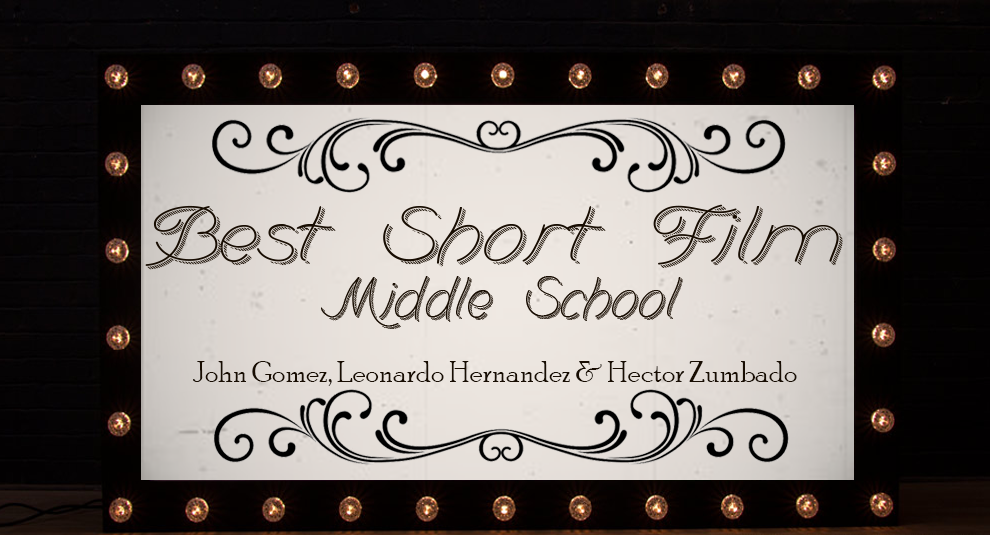
<style>
.page{position:relative;width:990px;height:535px}
.page>*{position:absolute;margin:0}
.t1{font:88px "BranumCursive";color:#180d02;scale:1.18 1}
.t2{font:65px "BranumCursive";color:#180d02}
.t3{font:30px "PoorRichard-Regular";color:#180d02}
</style>
<div class="page">
<p class="t1" style="left:145px;top:204px;width:698px;height:66px">Best Short Film</p>
<p class="t2" style="left:321px;top:276px;width:362px;height:53px">Middle School</p>
<p class="t3" style="left:193px;top:361px;width:604px;height:25px">John Gomez, Leonardo Hernandez &amp; Hector Zumbado</p>
</div>
